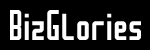
<style>
.page{position:relative;width:150px;height:50px;background:#000000}
.page>*{position:absolute;margin:0}
.t1{font:30px "Mocha-Book";color:#ffffff}
</style>
<div class="page">
<p class="t1" style="left:10px;top:10px;width:131px;height:30px">BizGlories</p>
</div>
